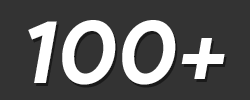
<style>
.page{position:relative;width:250px;height:100px;background:#333333}
.page>*{position:absolute;margin:0}
.t1{font:90px "ProductSans-BoldItalic";color:#ffffff}
</style>
<div class="page">
<p class="t1" style="left:28px;top:20px;width:197px;height:65px">100+</p>
</div>
